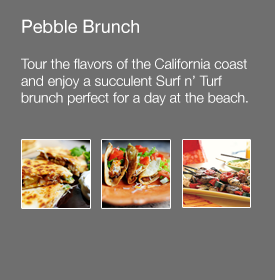
<style>
.page{position:relative;width:275px;height:280px;background:#6f6f6f}
.page>*{position:absolute;margin:0}
.t1{font:14px "HelveticaNeue-Light";color:#ffffff}
.t2{font:18px "HelveticaNeue";color:#ffffff}
</style>
<div class="page">
<p class="t1" style="left:21px;top:19px;width:227px;height:87px"><span class="t2">Pebble Brunch<br><br></span>Tour the flavors of the California coast and enjoy a succulent Surf n’ Turf brunch perfect for a day at the beach.</p>
</div>
